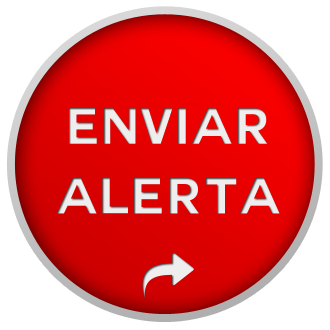
<style>
.page{position:relative;width:330px;height:330px;background:#ffffff}
.page>*{position:absolute;margin:0}
.t1{font:49.8px/69.7px "COUTURE-Bold";letter-spacing:0.05em;color:#ffffff;text-transform:uppercase}
</style>
<div class="page">
<p class="t1" style="left:56px;top:108px;width:224px;height:106px;text-align:center">enviar<br>alerta</p>
</div>
